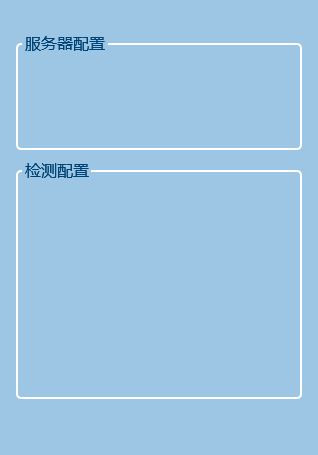
<style>
.page{position:relative;width:318px;height:455px;background:#9dc6e4}
.page>*{position:absolute;margin:0}
.t1{font:16px "MicrosoftYaHeiUI";color:#004475}
</style>
<div class="page">
<p class="t1" style="left:25px;top:36px;width:80px;height:15px">服务器配置</p>
<p class="t1" style="left:25px;top:163px;width:64px;height:15px">检测配置</p>
</div>
